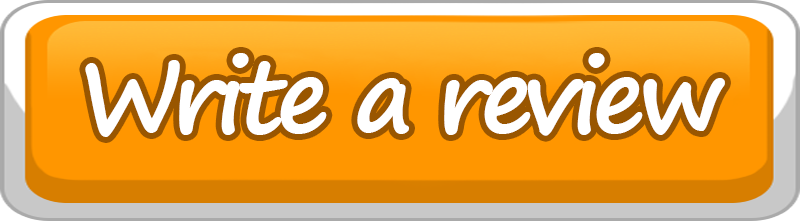
<style>
.page{position:relative;width:800px;height:221px;background:#ff9600}
.page>*{position:absolute;margin:0}
.t1{font:100px "SegoePrint-Bold";letter-spacing:-0.075em;color:#ffffff}
</style>
<div class="page">
<p class="t1" style="left:85px;top:53px;width:640px;height:84px">Write a review</p>
</div>
